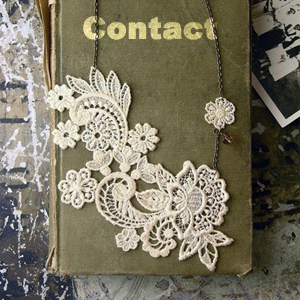
<style>
.page{position:relative;width:300px;height:300px}
.page>*{position:absolute;margin:0}
.t1{font:30px "Arial-Black";font-weight:bold}
</style>
<div class="page">
<p class="t1" style="left:83px;top:16px;width:134px;height:24px">Contact</p>
</div>
